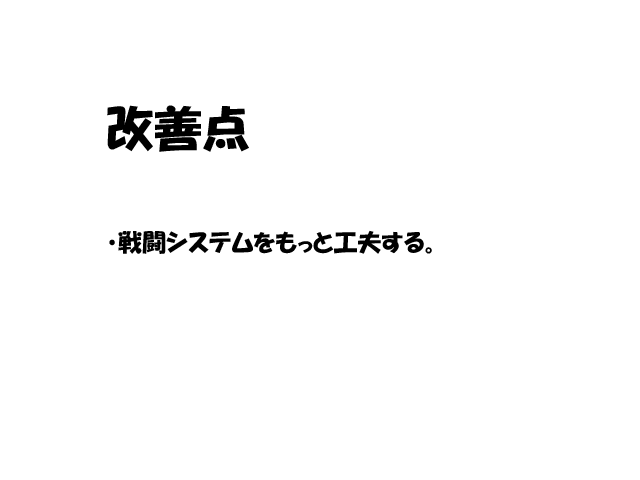
<style>
.page{position:relative;width:640px;height:480px;background:#ffffff}
.page>*{position:absolute;margin:0}
.t1{font:24px "HGPSoeiKakupoptai";color:#000000}
.t2{font:48px "HGPSoeiKakupoptai";color:#000000}
</style>
<div class="page">
<p class="t1" style="left:107px;top:105px;width:325px;height:149px"><span class="t2"><br>改善点<br></span><br>・戦闘システムをもっと工夫する。</p>
</div>
